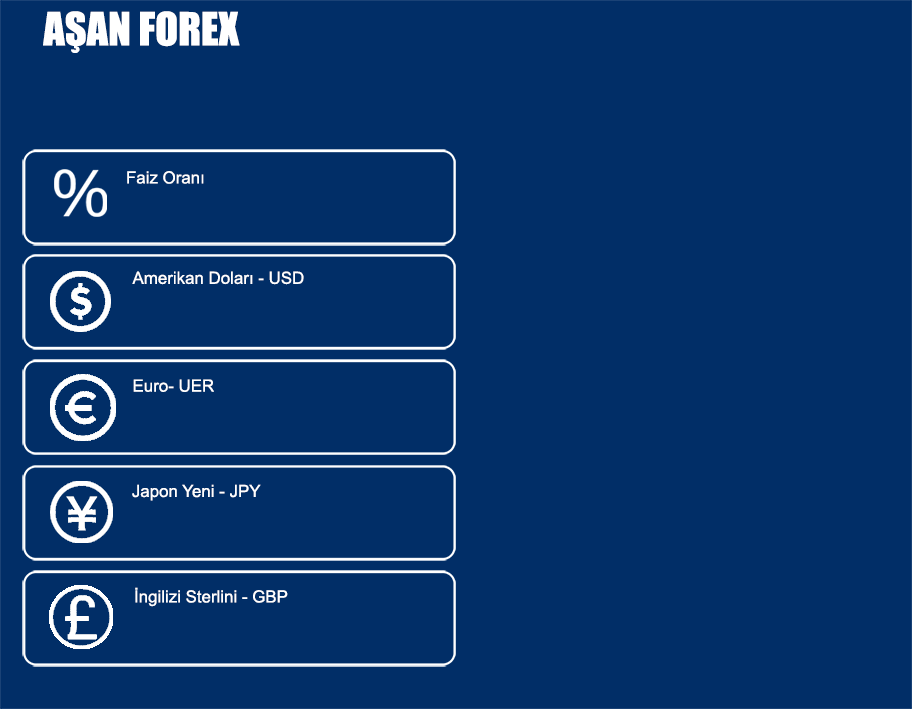
<style>
.page{position:relative;width:912px;height:709px;background:#012e67}
.page>*{position:absolute;margin:0}
.t1{font:42.2px "Impact";color:#ffffff}
.t2{font:16.9px "ArialMT";color:#ffffff}
</style>
<div class="page">
<p class="t1" style="left:43px;top:11px;width:197px;height:42px">AŞAN FOREX</p>
<p class="t2" style="left:127px;top:171px;width:77px;height:13px">Faiz Oranı</p>
<p class="t2" style="left:132px;top:271px;width:172px;height:14px">Amerikan Doları - USD</p>
<p class="t2" style="left:133px;top:379px;width:81px;height:13px">Euro- UER</p>
<p class="t2" style="left:132px;top:484px;width:129px;height:17px">Japon Yeni - JPY</p>
<p class="t2" style="left:135px;top:587px;width:153px;height:20px">İngilizi Sterlini - GBP</p>
</div>
